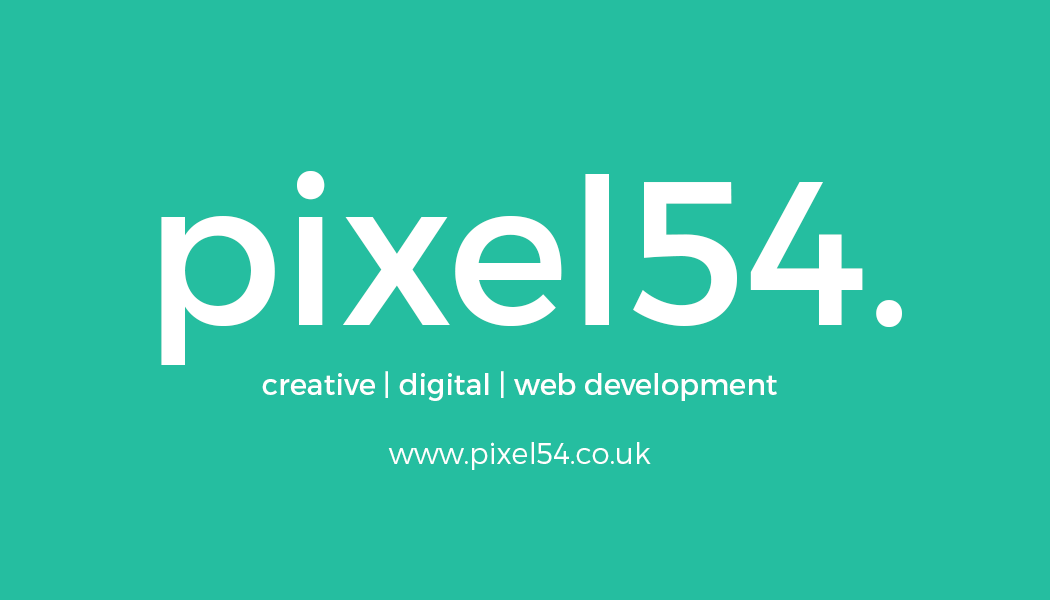
<style>
.page{position:relative;width:1050px;height:600px;background:#25bea0}
.page>*{position:absolute;margin:0}
.t1{font:203.8px "Montserrat-Regular";color:#ffffff}
.t2{font:29px "Montserrat-Regular";color:#ffffff}
.t3{font:29px "Montserrat-Light";color:#ffffff}
</style>
<div class="page">
<p class="t1" style="left:161px;top:171px;width:741px;height:194px">pixel54.</p>
<p class="t2" style="left:262px;top:371px;width:515px;height:99px;text-align:center">creative | digital | web development<br><span class="t3"><br>www.pixel54.co.uk</span></p>
</div>
